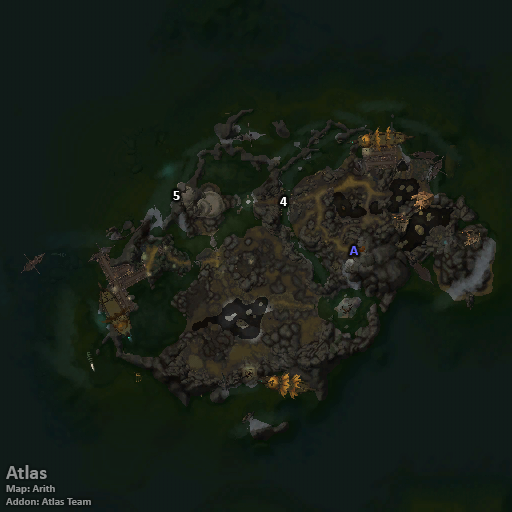
<style>
.page{position:relative;width:512px;height:512px;background:#101b18}
.page>*{position:absolute;margin:0}
.t1{font:14px "Calibri-Bold";color:#ffffff}
.t2{font:14px "Calibri-Bold";color:#6666ff}
.t3{font:11px "Calibri-Bold";color:#909392}
.t4{font:20px "Calibri-Bold";color:#909392}
</style>
<div class="page">
<p class="t1" style="left:173px;top:191px;width:7px;height:9px">5</p>
<p class="t1" style="left:280px;top:197px;width:7px;height:9px">4</p>
<p class="t2" style="left:349px;top:246px;width:9px;height:9px">A</p>
<p class="t3" style="left:6px;top:465px;width:85px;height:40px"><span class="t4">Atlas<br></span>Map: Arith<br>Addon: Atlas Team</p>
</div>
